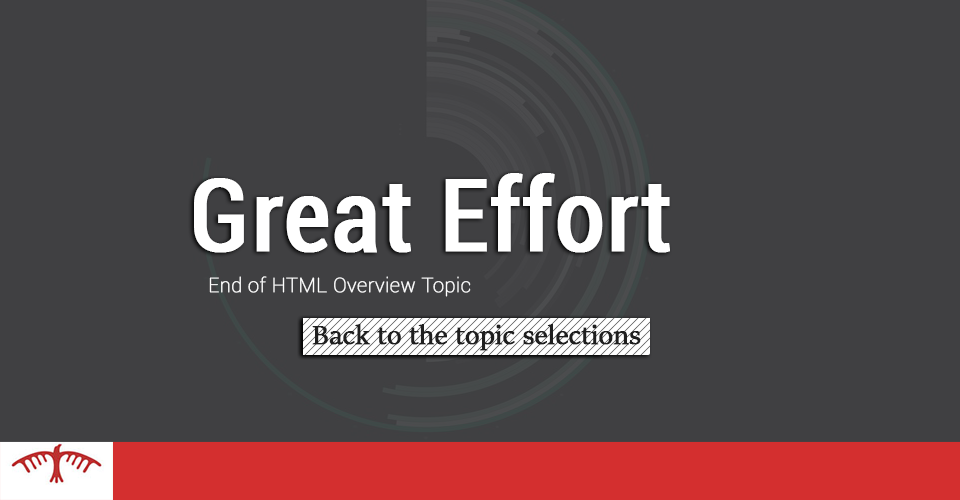
<style>
.page{position:relative;width:960px;height:500px;background:#404042}
.page>*{position:absolute;margin:0}
.t1{font:100px "Roboto-Condensed";color:#ffffff;font-weight:bold}
.t2{font:20px "Roboto-Thin";color:#ffffff;font-weight:bold}
.t3{font:30px "SitkaBanner";color:#1f1f1f;font-weight:bold}
</style>
<div class="page">
<p class="t1" style="left:194px;top:173px;width:476px;height:80px">Great Effort</p>
<p class="t2" style="left:209px;top:276px;width:262px;height:21px">End of HTML Overview Topic</p>
<p class="t3" style="left:312px;top:324px;width:329px;height:27px">Back to the topic selections</p>
</div>
